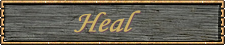
<style>
.page{position:relative;width:225px;height:45px}
.page>*{position:absolute;margin:0}
.t1{font:30px "MonotypeCorsiva";color:#cdb366;font-style:italic;scale:1.1 1}
.t2{font:30px "MonotypeCorsiva";font-style:italic;scale:1.1 1}
</style>
<div class="page">
<p class="t1" style="left:74px;top:10px;width:67px;height:23px">Heal</p>
<p class="t2" style="left:75px;top:11px;width:67px;height:23px">Heal</p>
</div>
